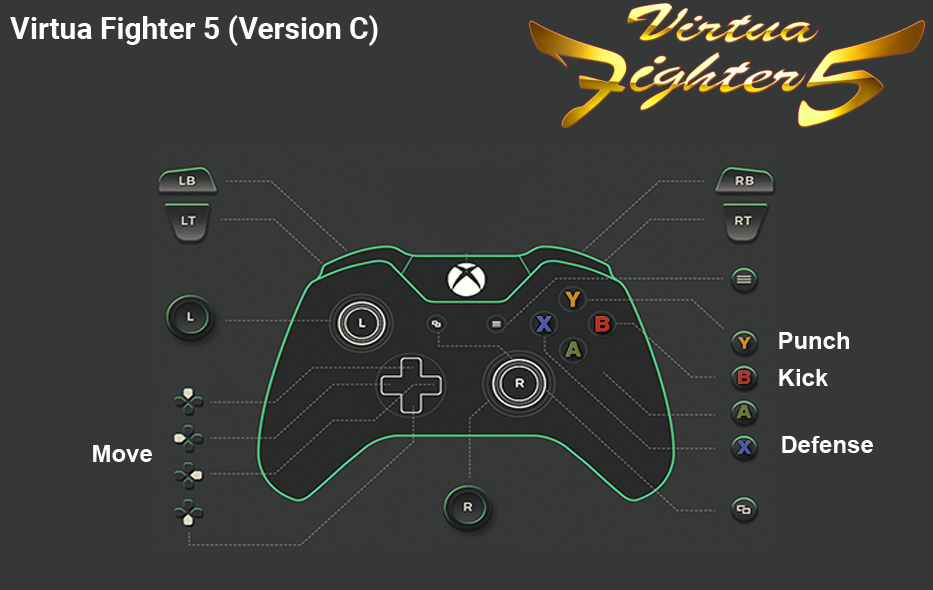
<style>
.page{position:relative;width:933px;height:590px;background:#363838}
.page>*{position:absolute;margin:0}
.t1{font:30px "Roboto-Bold";color:#ffffff}
.t2{font:24px "Arial-BoldMT";color:#fefefe}
</style>
<div class="page">
<p class="t1" style="left:10px;top:15px;width:368px;height:31px">Virtua Fighter 5 (Version C)</p>
<p class="t2" style="left:779px;top:332px;width:70px;height:17px">Punch</p>
<p class="t2" style="left:779px;top:369px;width:49px;height:17px">Kick</p>
<p class="t2" style="left:782px;top:436px;width:91px;height:17px">Defense</p>
<p class="t2" style="left:93px;top:445px;width:59px;height:17px">Move</p>
</div>
